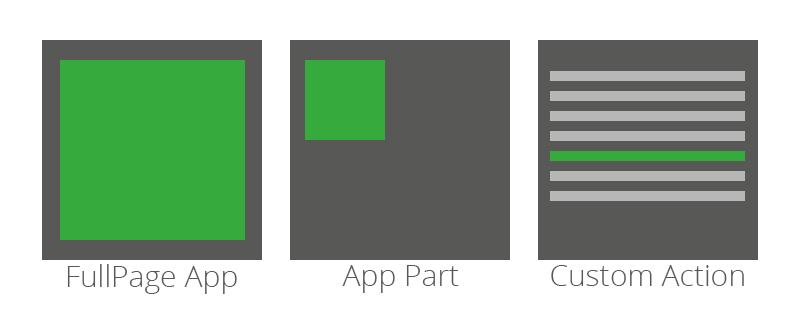
<style>
.page{position:relative;width:800px;height:313px;background:#ffffff}
.page>*{position:absolute;margin:0}
.t1{font:30px "OpenSans-Light";color:#585856}
</style>
<div class="page">
<p class="t1" style="left:67px;top:264px;width:170px;height:30px">FullPage App</p>
<p class="t1" style="left:342px;top:265px;width:117px;height:28px">App Part</p>
<p class="t1" style="left:551px;top:265px;width:193px;height:21px">Custom Action</p>
</div>
